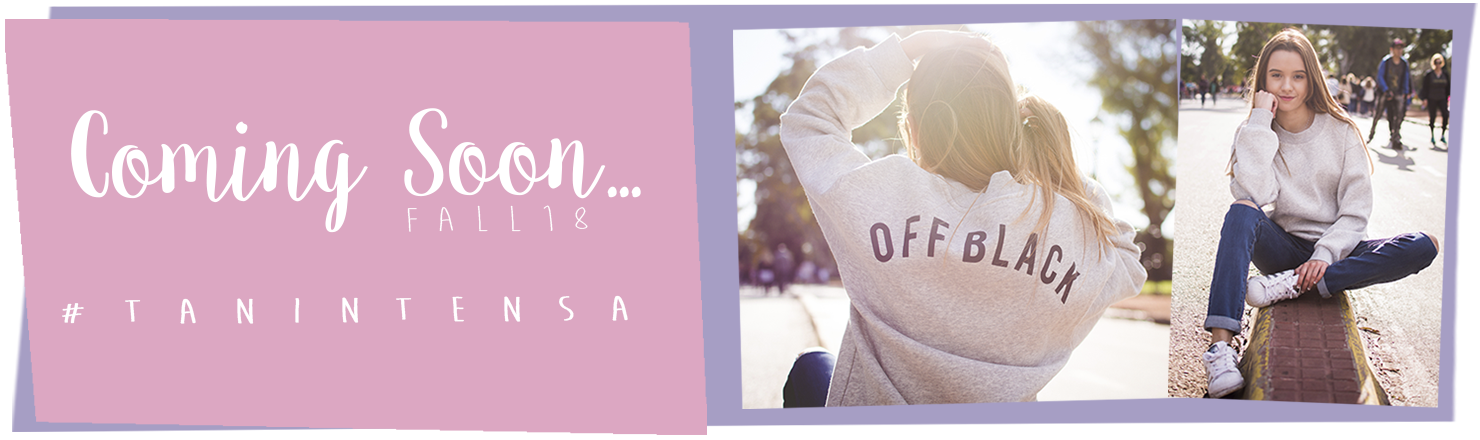
<style>
.page{position:relative;width:1480px;height:440px;background:#dca7c2}
.page>*{position:absolute;margin:0}
.t1{font:112.9px "Sweet_Pea";color:#ffffff}
.t2{font:35.7px "MoonFlower";letter-spacing:0.26em;color:#ffffff;scale:1.7 1}
.t3{font:35.7px "MoonFlower";letter-spacing:0.56em;color:#ffffff;font-weight:bold;scale:1.7 1}
</style>
<div class="page">
<p class="t1" style="left:71px;top:108px;width:570px;height:125px">Coming Soon...</p>
<p class="t2" style="left:407px;top:205px;width:181px;height:27px">FALL18</p>
<p class="t3" style="left:62px;top:295px;width:566px;height:29px">#Tanintensa</p>
</div>
